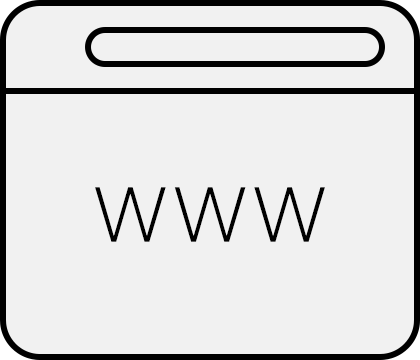
<style>
.page{position:relative;width:420px;height:360px;background:#f1f1f1}
.page>*{position:absolute;margin:0}
.t1{font:100px "Inter-ExtraLight";color:#000000}
</style>
<div class="page">
<p class="t1" style="left:95px;top:187px;width:230px;height:55px">www</p>
</div>
